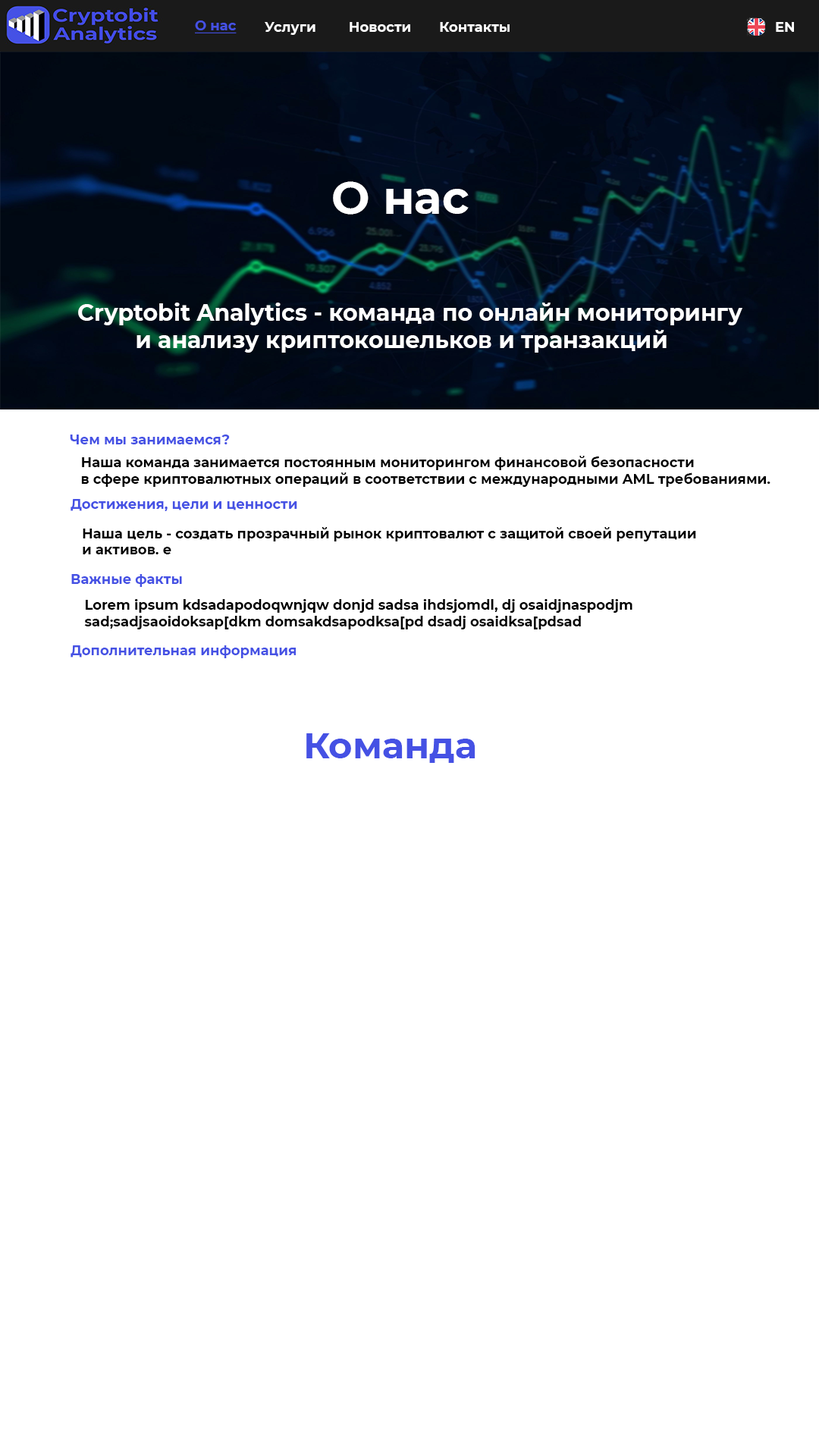
<style>
.page{position:relative;width:819px;height:1456px;background:#ffffff}
.page>*{position:absolute;margin:0}
.t1{font:13.6px "Montserrat-Bold";color:#4551e4;text-decoration:underline}
.t2{font:13.6px "Montserrat-Bold";color:#ffffff}
.t3{font:13.6px "Montserrat-Bold";color:#fefefe}
.t4{font:45.5px "Montserrat-Bold";color:#ffffff}
.t5{font:22.7px "Montserrat-Bold";color:#ffffff}
.t6{font:13.6px "Montserrat-Bold";color:#4551e4}
.t7{font:13.6px "Montserrat-Bold";color:#000000}
.t8{font:36.4px "Montserrat-Bold";color:#4551e4}
</style>
<div class="page">
<p class="t1" style="left:195px;top:20px;width:42px;height:13px">О нас</p>
<p class="t1" style="left:195px;top:20px;width:42px;height:13px">О нас</p>
<p class="t2" style="left:265px;top:22px;width:50px;height:13px">Услуги</p>
<p class="t3" style="left:350px;top:22px;width:60px;height:10px">Новости</p>
<p class="t3" style="left:440px;top:22px;width:70px;height:10px">Контакты</p>
<p class="t3" style="left:776px;top:22px;width:18px;height:10px">EN</p>
<p class="t3" style="left:776px;top:22px;width:18px;height:10px">EN</p>
<p class="t4" style="left:333px;top:181px;width:136px;height:34px">О нас</p>
<p class="t5" style="left:78px;top:303px;width:664px;height:50px">Cryptobit Analytics - команда по онлайн мониторингу<br>         и анализу криптокошельков и транзакций</p>
<p class="t6" style="left:70px;top:435px;width:160px;height:9px">Чем мы занимаемся?</p>
<p class="t7" style="left:81px;top:456px;width:689px;height:31px">Наша команда занимается постоянным мониторингом финансовой безопасности <br>в сфере криптовалютных операций в соответствии с международными AML требованиями.</p>
<p class="t6" style="left:71px;top:499px;width:226px;height:12px">Достижения, цели и ценности</p>
<p class="t7" style="left:83px;top:527px;width:613px;height:27px">Наша цель - создать прозрачный рынок криптовалют с защитой своей репутации <br>и активов. е</p>
<p class="t6" style="left:71px;top:574px;width:111px;height:13px">Важные факты</p>
<p class="t7" style="left:84px;top:599px;width:548px;height:30px">Lorem ipsum kdsadapodoqwnjqw donjd sadsa ihdsjomdl, dj osaidjnaspodjm <br>sad;sadjsaoidoksap[dkm domsakdsapodksa[pd dsadj osaidksa[pdsad</p>
<p class="t6" style="left:71px;top:645px;width:225px;height:13px">Дополнительная информация</p>
<p class="t8" style="left:306px;top:733px;width:169px;height:30px">Команда</p>
</div>
